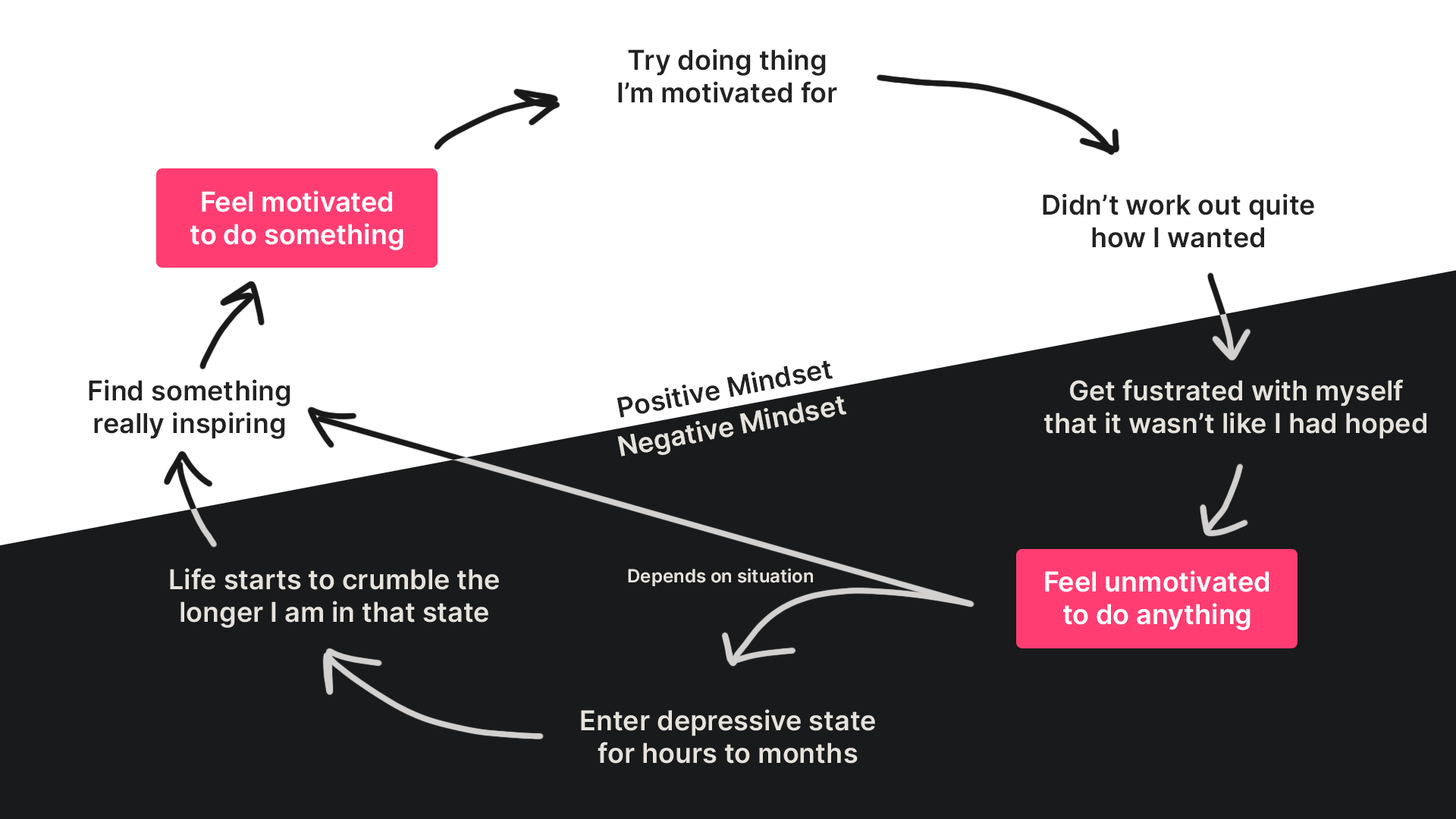
<style>
.page{position:relative;width:1456px;height:819px;background:#ffffff}
.page>*{position:absolute;margin:0}
.t1{font:27.3px "Inter-SemiBold";color:#222222}
.t2{font:27.3px "Inter-SemiBold";color:#ffffff}
.t3{font:27.3px "Inter-SemiBold";color:#e6e2dc}
.t4{font:18.2px "Inter-SemiBold";color:#e6e2dc}
</style>
<div class="page">
<p class="t1" style="left:618px;top:49px;width:219px;height:54px;text-align:center">Try doing thing<br>I’m motivated for</p>
<p class="t2" style="left:190px;top:190px;width:213px;height:60px;text-align:center">Feel motivated<br>to do something</p>
<p class="t1" style="left:1043px;top:193px;width:271px;height:55px;text-align:center">Didn’t work out quite<br>how I wanted</p>
<p class="t1" style="left:89px;top:379px;width:201px;height:60px;text-align:center">Find something<br>really inspiring</p>
<p class="t3" style="left:1044px;top:379px;width:382px;height:60px;text-align:center">Get fustrated with myself<br>that it wasn’t like I had hoped</p>
<p class="t3" style="left:170px;top:568px;width:329px;height:60px;text-align:center">Life starts to crumble the<br>longer I am in that state</p>
<p class="t4" style="left:628px;top:568px;width:185px;height:18px">Depends on situation</p>
<p class="t2" style="left:1045px;top:570px;width:224px;height:60px;text-align:center">Feel unmotivated<br>to do anything</p>
<p class="t3" style="left:581px;top:709px;width:294px;height:55px;text-align:center">Enter depressive state<br>for hours to months</p>
</div>
